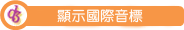
<style>
.page{position:relative;width:184px;height:30px;background:#f79646}
.page>*{position:absolute;margin:0}
.t1{font:14px "DFYuan-Md-HK-BF";letter-spacing:0.02em;color:#fefcfa}
</style>
<div class="page">
<p class="t1" style="left:57px;top:9px;width:86px;height:14px">顯示國際音標</p>
</div>
